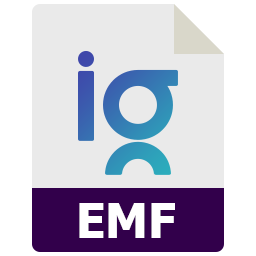
<style>
.page{position:relative;width:256px;height:256px;background:#eaeaea}
.page>*{position:absolute;margin:0}
.t1{font:48px "Tahoma-Bold";color:#ffffff}
</style>
<div class="page">
<p class="t1" style="left:79px;top:203px;width:96px;height:35px">EMF</p>
</div>
